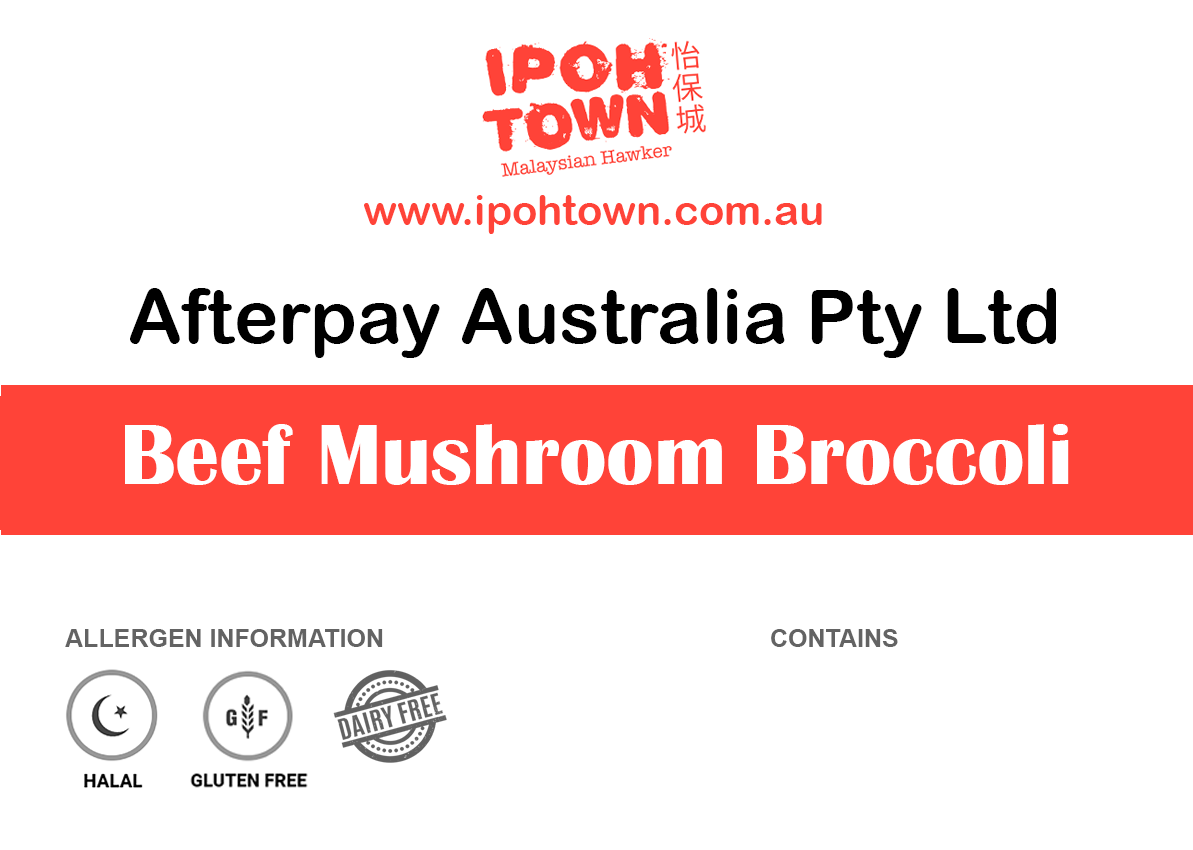
<style>
.page{position:relative;width:1193px;height:850px;background:#ffffff}
.page>*{position:absolute;margin:0}
.t1{font:41.7px "ArialRoundedMTBold";color:#ff4338}
.t2{font:75px "ArialRoundedMTBold";color:#000000}
.t3{font:87.5px "BritannicBold";color:#ffffff}
.t4{font:25px "Arial-BoldMT";color:#636363}
</style>
<div class="page">
<p class="t1" style="left:364px;top:195px;width:458px;height:39px">www.ipohtown.com.au</p>
<p class="t2" style="left:130px;top:288px;width:926px;height:70px">Afterpay Australia Pty Ltd</p>
<p class="t3" style="left:125px;top:424px;width:944px;height:61px">Beef Mushroom Broccoli</p>
<p class="t4" style="left:65px;top:629px;width:318px;height:18px">ALLERGEN INFORMATION</p>
<p class="t4" style="left:771px;top:629px;width:127px;height:18px">CONTAINS</p>
</div>
